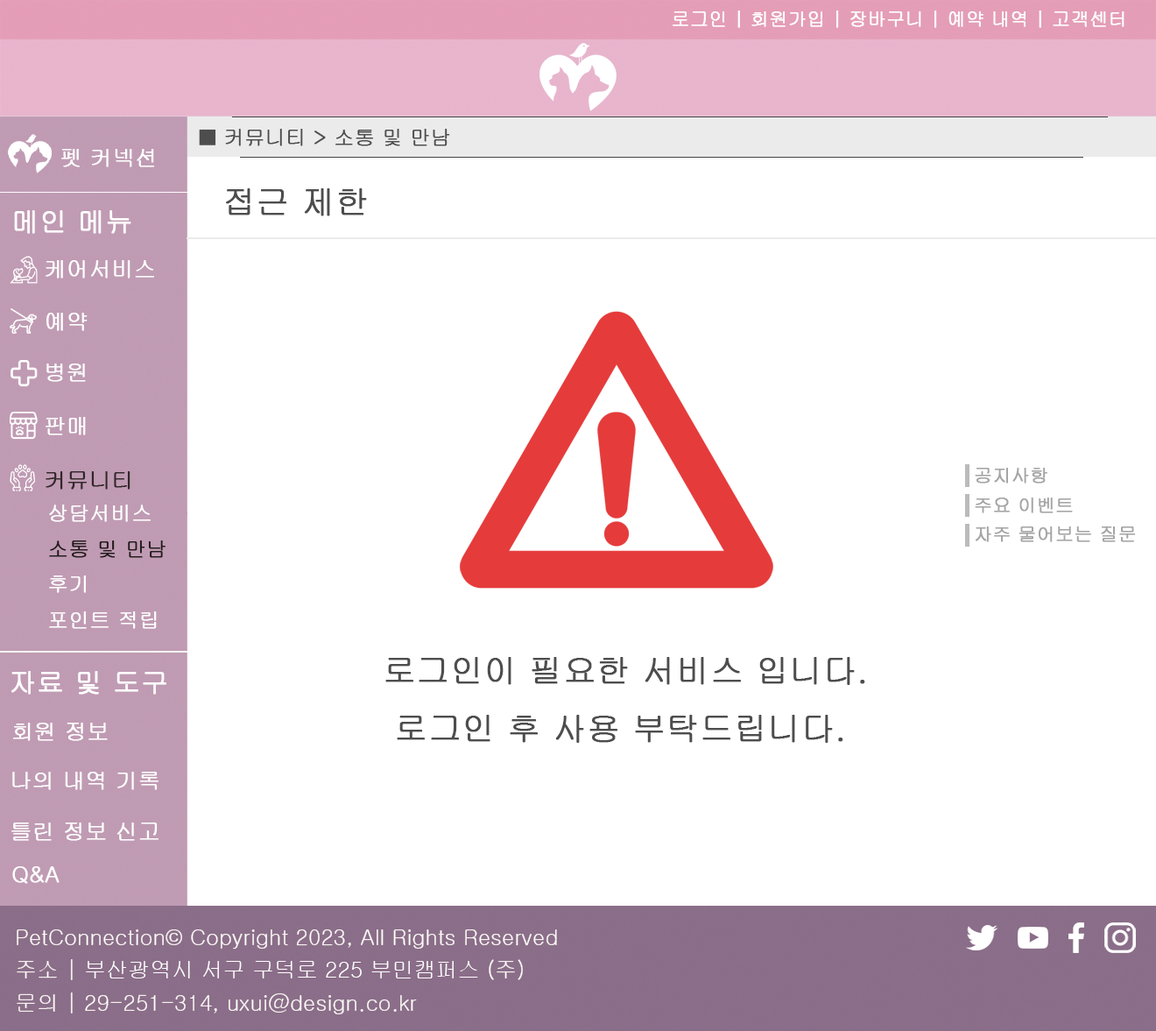
<style>
.page{position:relative;width:1156px;height:1031px;background:#ffffff}
.page>*{position:absolute;margin:0}
.t1{font:18.4px "Gulim";color:#ffffff;font-weight:bold}
.t2{font:20.1px "Gulim";color:#4d4d4d;font-weight:bold}
.t3{font:21.9px "Gulim";color:#ffffff;font-weight:bold}
.t4{font:32.9px "Gulim";color:#4d4d4d;font-weight:bold}
.t5{font:27.4px "Gulim";color:#ffffff;font-weight:bold}
.t6{font:21.9px "Gulim";color:#32272a;font-weight:bold}
.t7{font:18.3px "Gulim";color:#a5a5a5;font-weight:bold}
.t8{font:21.9px/32.9px "Gulim";color:#ffffff}
</style>
<div class="page">
<p class="t1" style="left:673px;top:11px;width:452px;height:17px">로그인 | 회원가입 | 장바구니 | 예약 내역 | 고객센터</p>
<p class="t2" style="left:199px;top:129px;width:251px;height:17px">■ 커뮤니티 &gt; 소통 및 만남</p>
<p class="t3" style="left:61px;top:149px;width:93px;height:18px">펫 커넥션</p>
<p class="t4" style="left:226px;top:188px;width:141px;height:28px">접근 제한</p>
<p class="t5" style="left:14px;top:210px;width:117px;height:24px">메인 메뉴</p>
<p class="t3" style="left:46px;top:260px;width:108px;height:19px">케어서비스</p>
<p class="t3" style="left:46px;top:313px;width:42px;height:18px">예약</p>
<p class="t3" style="left:46px;top:364px;width:40px;height:18px">병원</p>
<p class="t3" style="left:46px;top:417px;width:40px;height:18px">판매</p>
<p class="t6" style="left:46px;top:471px;width:85px;height:19px">커뮤니티</p>
<p class="t7" style="left:975px;top:468px;width:73px;height:16px">공지사항</p>
<p class="t7" style="left:975px;top:498px;width:98px;height:15px">주요 이벤트</p>
<p class="t7" style="left:976px;top:527px;width:160px;height:15px">자주 물어보는 질문</p>
<p class="t4" style="left:385px;top:657px;width:481px;height:86px">로그인이 필요한 서비스 입니다.<br> 로그인 후 사용 부탁드립니다.</p>
<p class="t5" style="left:11px;top:671px;width:155px;height:24px">자료 및 도구</p>
<p class="t3" style="left:13px;top:723px;width:95px;height:18px">회원 정보</p>
<p class="t3" style="left:12px;top:772px;width:147px;height:18px">나의 내역 기록</p>
<p class="t3" style="left:11px;top:823px;width:148px;height:18px">틀린 정보 신고</p>
<p class="t3" style="left:12px;top:866px;width:48px;height:18px">Q&amp;A</p>
<p class="t8" style="left:17px;top:930px;width:540px;height:84px">PetConnection© Copyright 2023, All Rights Reserved<br>주소 | 부산광역시 서구 구덕로 225 부민캠퍼스 (주)<br>문의 | 29-251-314, uxui@design.co.kr</p>
</div>
